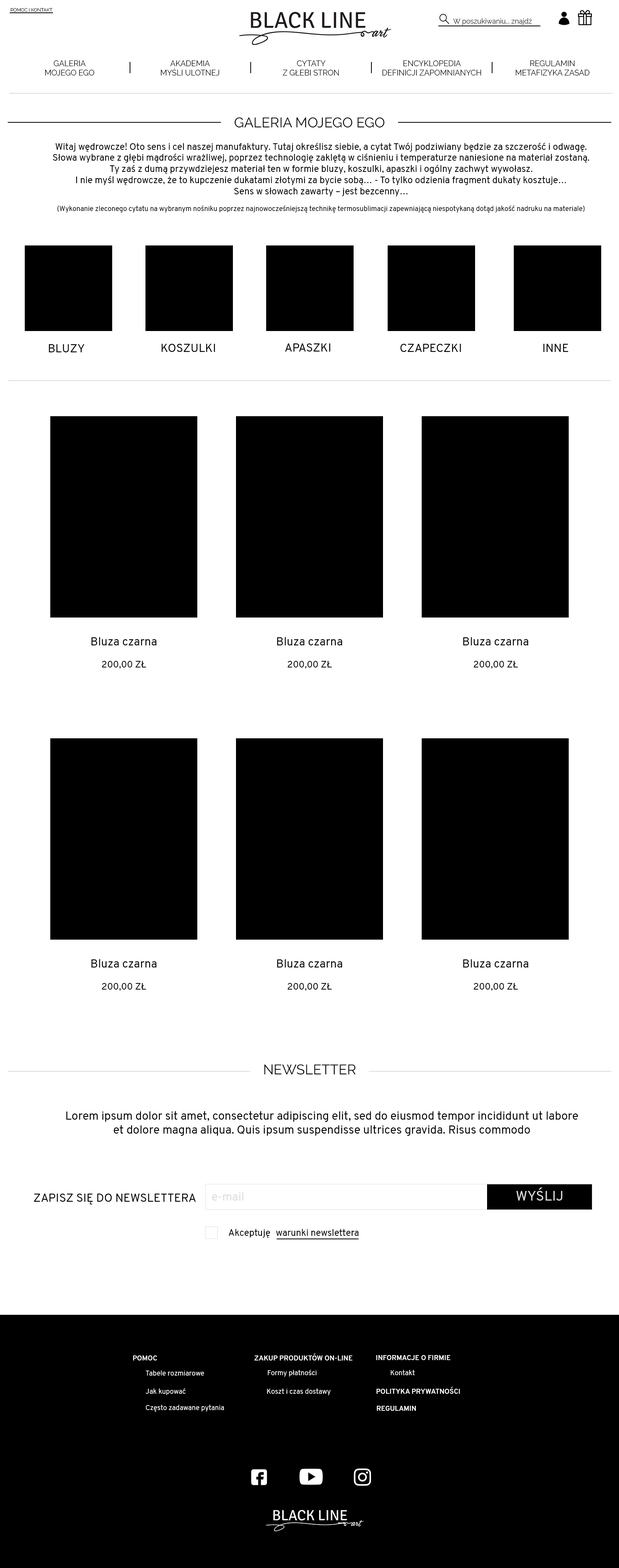
<style>
.page{position:relative;width:619px;height:1568px;background:#ffffff}
.page>*{position:absolute;margin:0}
.t1{font:4.6px "Raleway-Regular";color:#010000}
.t2{font:7px "Raleway-Regular";color:#322e2e}
.t3{font:7.7px "Raleway-Regular";color:#010000}
.t4{font:13.9px "Raleway-Regular";color:#000000}
.t5{font:9.3px "Overpass-Regular";color:#000000}
.t6{font:7px "Overpass-Regular";color:#000000}
.t7{font:11.6px "Overpass-Regular";color:#000000}
.t8{font:11.6px "Overpass-Regular";color:#dcdcdc}
.t9{font:13.9px "Overpass-Regular";color:#dcdcdc}
.t10{font:7px "Overpass-Bold";color:#fefefe}
.t11{font:7px "Overpass-Regular";color:#fefefe}
</style>
<div class="page">
<p class="t1" style="left:10px;top:8px;width:43px;height:4px">POMOC I KONTAKT</p>
<p class="t2" style="left:453px;top:18px;width:79px;height:7px">W poszukiwaniu... znajdź</p>
<p class="t3" style="left:45px;top:60px;width:49px;height:15px;text-align:center">GALERIA<br>MOJEGO EGO</p>
<p class="t3" style="left:161px;top:60px;width:59px;height:15px;text-align:center">AKADEMIA<br>MYŚLI ULOTNEJ</p>
<p class="t3" style="left:283px;top:60px;width:56px;height:15px;text-align:center">CYTATY<br>Z GŁEBI STRON</p>
<p class="t3" style="left:383px;top:60px;width:99px;height:15px;text-align:center">ENCYKLOPEDIA<br>DEFINICJI ZAPOMNIANYCH</p>
<p class="t3" style="left:516px;top:60px;width:74px;height:15px;text-align:center">REGULAMIN<br>METAFIZYKA ZASAD</p>
<p class="t4" style="left:235px;top:117px;width:150px;height:11px">GALERIA MOJEGO EGO</p>
<p class="t5" style="left:53px;top:142px;width:537px;height:71px;text-align:center">Witaj wędrowcze! Oto sens i cel naszej manufaktury. Tutaj określisz siebie, a cytat Twój podziwiany będzie za szczerość i odwagę. Słowa wybrane z głębi mądrości wrażliwej, poprzez technologię zaklętą w ciśnieniu i temperaturze naniesione na materiał zostaną. Ty zaś z dumą przywdziejesz materiał ten w formie bluzy, koszulki, apaszki i ogólny zachwyt wywołasz. <br>I nie myśl wędrowcze, że to kupczenie dukatami złotymi za bycie sobą… - To tylko odzienia fragment dukaty kosztuje… <br>Sens w słowach zawarty – jest bezcenny… <br><span class="t6"><br>(Wykonanie zleconego cytatu na wybranym nośniku poprzez najnowocześniejszą technikę termosublimacji zapewniającą niespotykaną dotąd jakość nadruku na materiale)</span></p>
<p class="t7" style="left:49px;top:344px;width:35px;height:8px">BLUZY</p>
<p class="t7" style="left:161px;top:344px;width:54px;height:8px">KOSZULKI</p>
<p class="t7" style="left:285px;top:343px;width:46px;height:9px">APASZKI</p>
<p class="t7" style="left:401px;top:344px;width:60px;height:8px">CZAPECZKI</p>
<p class="t7" style="left:544px;top:344px;width:25px;height:8px">INNE</p>
<p class="t7" style="left:91px;top:637px;width:66px;height:32px;text-align:center">Bluza czarna<br><span class="t5"><br>200,00 ZŁ</span></p>
<p class="t7" style="left:277px;top:637px;width:66px;height:32px;text-align:center">Bluza czarna<br><span class="t5"><br>200,00 ZŁ</span></p>
<p class="t7" style="left:463px;top:637px;width:66px;height:32px;text-align:center">Bluza czarna<br><span class="t5"><br>200,00 ZŁ</span></p>
<p class="t7" style="left:91px;top:959px;width:66px;height:32px;text-align:center">Bluza czarna<br><span class="t5"><br>200,00 ZŁ</span></p>
<p class="t7" style="left:277px;top:959px;width:66px;height:32px;text-align:center">Bluza czarna<span class="t5"> <br><br>200,00 ZŁ</span></p>
<p class="t7" style="left:463px;top:959px;width:66px;height:32px;text-align:center">Bluza czarna<br><span class="t5"><br>200,00 ZŁ</span></p>
<p class="t4" style="left:264px;top:1064px;width:92px;height:11px">NEWSLETTER</p>
<p class="t7" style="left:66px;top:1111px;width:512px;height:25px;text-align:center">Lorem ipsum dolor sit amet, consectetur adipiscing elit, sed do eiusmod tempor incididunt ut labore et dolore magna aliqua. Quis ipsum suspendisse ultrices gravida. Risus commodo</p>
<p class="t7" style="left:34px;top:1194px;width:162px;height:10px">ZAPISZ SIĘ DO NEWSLETTERA</p>
<p class="t8" style="left:212px;top:1192px;width:32px;height:9px">e-mail</p>
<p class="t9" style="left:516px;top:1187px;width:47px;height:14px">WYŚLIJ</p>
<p class="t5" style="left:229px;top:1228px;width:41px;height:10px">Akceptuję</p>
<p class="t5" style="left:276px;top:1228px;width:83px;height:8px">warunki newslettera</p>
<p class="t10" style="left:133px;top:1355px;width:24px;height:5px">POMOC</p>
<p class="t10" style="left:254px;top:1354px;width:99px;height:6px">ZAKUP PRODUKTÓW ON-LINE</p>
<p class="t10" style="left:376px;top:1355px;width:75px;height:5px">INFORMACJE O FIRMIE</p>
<p class="t11" style="left:146px;top:1370px;width:58px;height:6px">Tabele rozmiarowe</p>
<p class="t11" style="left:268px;top:1370px;width:49px;height:7px">Formy płatności</p>
<p class="t11" style="left:391px;top:1370px;width:24px;height:5px">Kontakt</p>
<p class="t11" style="left:146px;top:1388px;width:40px;height:7px">Jak kupować</p>
<p class="t11" style="left:267px;top:1388px;width:64px;height:7px">Koszt i czas dostawy</p>
<p class="t10" style="left:377px;top:1387px;width:83px;height:7px">POLITYKA PRYWATNOŚCI</p>
<p class="t11" style="left:146px;top:1405px;width:78px;height:7px">Często zadawane pytania</p>
<p class="t10" style="left:377px;top:1406px;width:39px;height:5px">REGULAMIN</p>
</div>
